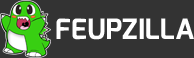
<style>
.page{position:relative;width:194px;height:58px;background:#333333}
.page>*{position:absolute;margin:0}
.t1{font:28px "Exo-Bold";color:#ffffff}
</style>
<div class="page">
<p class="t1" style="left:56px;top:18px;width:138px;height:22px">FEUPZILLA</p>
</div>
